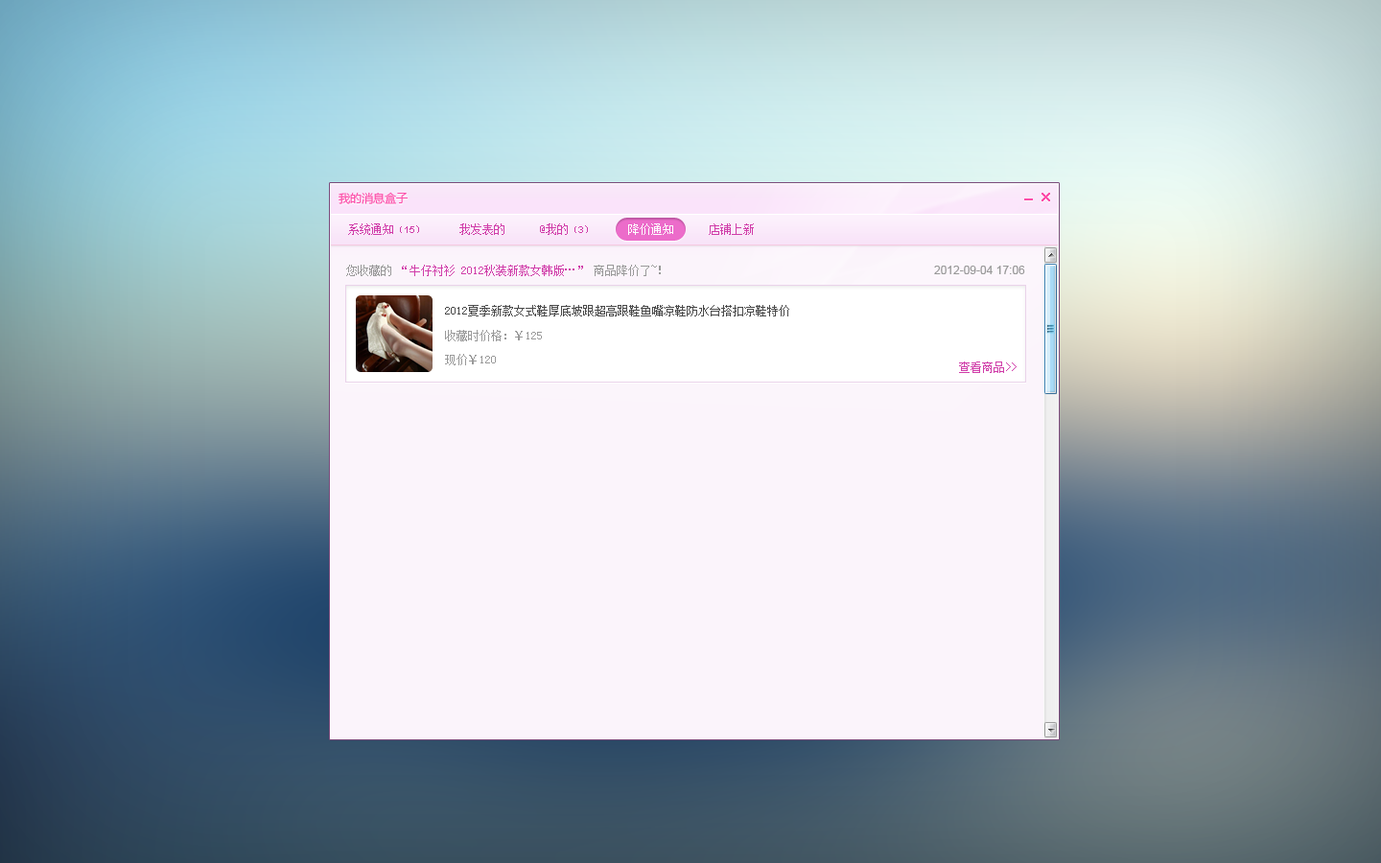
<style>
.page{position:relative;width:1381px;height:863px;background:#fbf4fb}
.page>*{position:absolute;margin:0}
.t1{font:11.5px "MicrosoftYaHei";color:#fc4ea9}
.t2{font:11.5px "SimSun";color:#d03da9}
.t3{font:9.6px "SimSun";color:#d03da9}
.t4{font:9.6px "ArialMT";color:#d03da9}
.t5{font:11.5px "SimSun";color:#fefefe}
.t6{font:11.5px "SimSun";color:#999999}
.t7{font:11.5px "ArialMT";color:#999999}
.t8{font:11.5px "SimSun";color:#494949}
.t9{font:11.5px/24px "SimSun";color:#999999}
</style>
<div class="page">
<p class="t1" style="left:339px;top:192px;width:69px;height:12px">我的消息盒子</p>
<p class="t2" style="left:348px;top:223px;width:406px;height:12px">系统通知<span class="t3">（</span><span class="t4">15</span><span class="t3">）　　　</span>我发表的　　　@我的<span class="t3">（</span><span class="t4">3</span><span class="t3">）　　　</span><span class="t5">降价通知</span>　　　店铺上新</p>
<p class="t2" style="left:346px;top:265px;width:315px;height:11px"><span class="t6">您收藏的 </span>“牛仔衬衫 2012秋装新款女韩版…” <span class="t6">商品降价了~！</span></p>
<p class="t7" style="left:934px;top:266px;width:91px;height:8px">2012-09-04 17:06</p>
<p class="t8" style="left:445px;top:305px;width:344px;height:12px">2012夏季新款女式鞋厚底坡跟超高跟鞋鱼嘴凉鞋防水台搭扣凉鞋特价</p>
<p class="t9" style="left:445px;top:330px;width:97px;height:35px">收藏时价格：￥125<br>现价￥120</p>
<p class="t2" style="left:959px;top:362px;width:58px;height:11px">查看商品&gt;&gt;</p>
</div>
